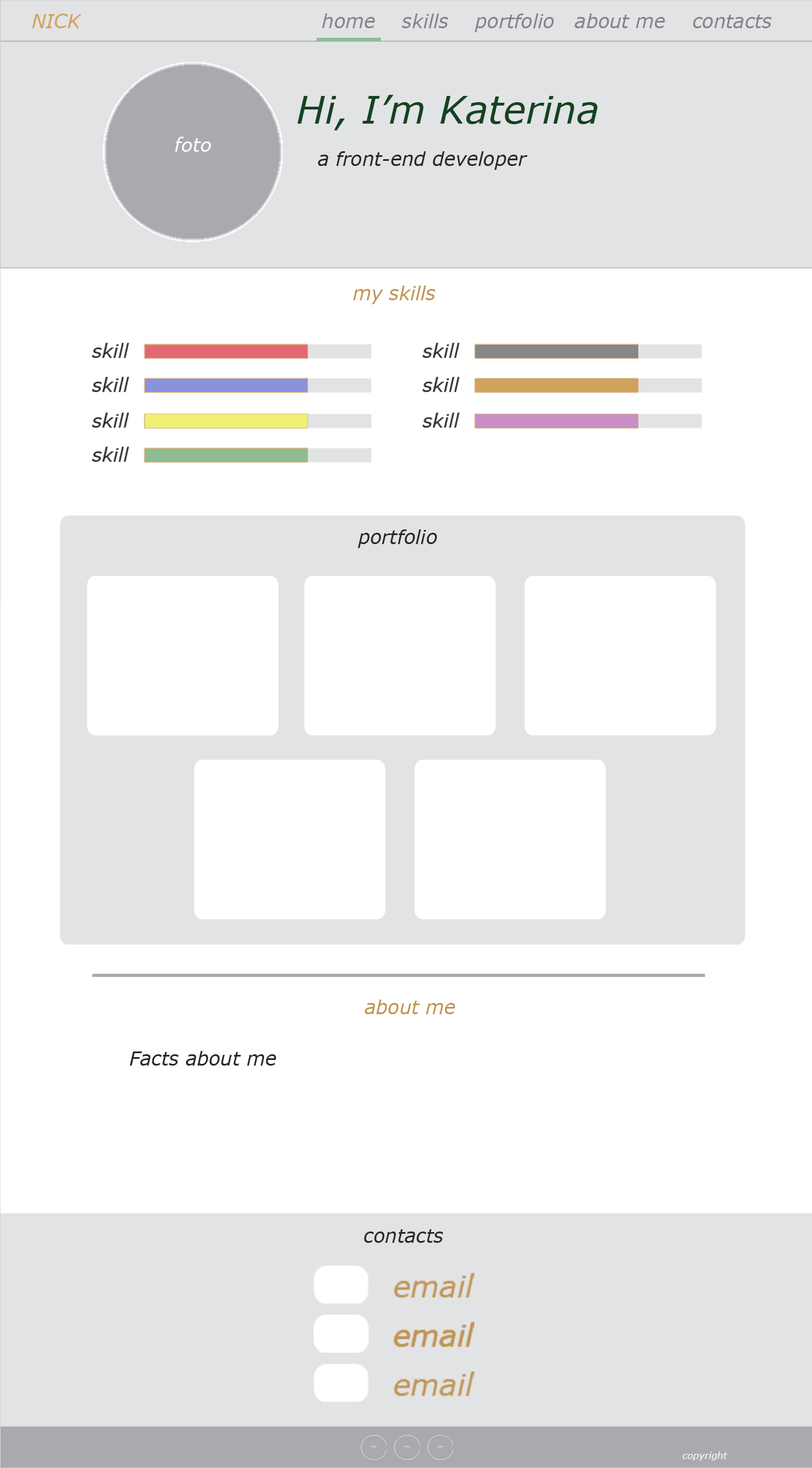
<style>
.page{position:relative;width:812px;height:1468px;background:#ffffff}
.page>*{position:absolute;margin:0}
.t1{font:19px "Verdana-Italic";color:#d1a25e}
.t2{font:19px "Verdana-Italic";color:#828487}
.t3{font:38.1px "Verdana-Italic";color:#154221}
.t4{font:19px "Verdana-Italic";color:#292826}
.t5{font:19px "Verdana-Italic";color:#c19453}
.t6{font:9.5px "Verdana-Italic";color:#ffffff}
</style>
<div class="page">
<p class="t1" style="left:32px;top:14px;width:50px;height:14px">NICK</p>
<p class="t2" style="left:322px;top:14px;width:450px;height:18px">home    skills    portfolio   about me    contacts</p>
<p class="t3" style="left:297px;top:95px;width:301px;height:35px">Hi, I’m Katerina</p>
<p class="t4" style="left:318px;top:151px;width:210px;height:19px">a front-end developer</p>
<p class="t5" style="left:353px;top:286px;width:83px;height:18px">my skills</p>
<p class="t4" style="left:358px;top:529px;width:79px;height:19px">portfolio</p>
<p class="t5" style="left:365px;top:1000px;width:91px;height:14px">about me</p>
<p class="t4" style="left:130px;top:1051px;width:147px;height:15px">Facts about me</p>
<p class="t4" style="left:364px;top:1229px;width:80px;height:14px">contacts</p>
<p class="t6" style="left:682px;top:1452px;width:46px;height:9px">copyright</p>
</div>
